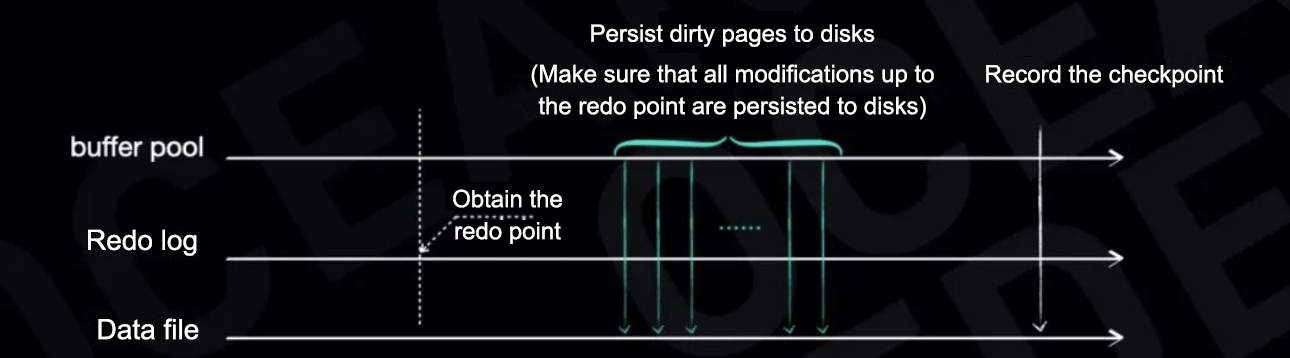
<style>
.page{position:relative;width:1290px;height:358px;background:#000002}
.page>*{position:absolute;margin:0}
.t1{font:12px/32px "ArialMT";color:#ffffff}
.t2{font:24px/32px "ArialMT";color:#ffffff}
.t3{font:28px "ArialMT";color:#ffffff}
</style>
<div class="page">
<p class="t1" style="left:591px;top:24px;width:284px;height:23px;text-align:center">Persist dirty pages to disks</p>
<p class="t1" style="left:531px;top:64px;width:403px;height:56px;text-align:center">(Make sure that all modifications up to the redo point are persisted to disks)</p>
<p class="t1" style="left:986px;top:65px;width:238px;height:23px;text-align:center">Record the checkpoint</p>
<p class="t2" style="left:453px;top:189px;width:109px;height:55px;text-align:center">Obtain the redo point</p>
<p class="t3" style="left:88px;top:229px;width:109px;height:27px">Redo log</p>
<p class="t3" style="left:98px;top:318px;width:101px;height:22px">Data file</p>
</div>
